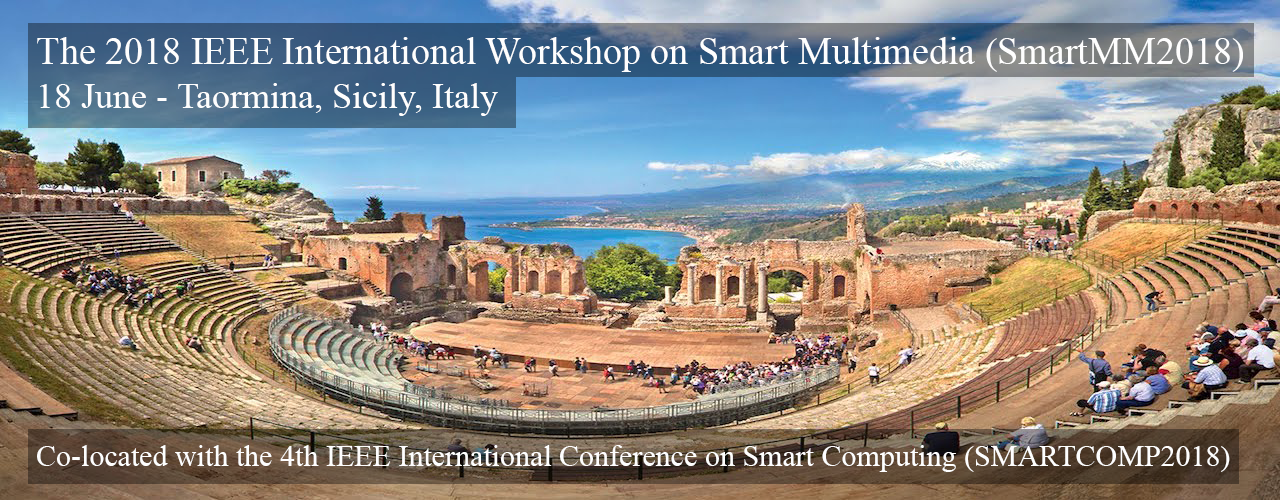
<style>
.page{position:relative;width:1280px;height:500px}
.page>*{position:absolute;margin:0}
.t1{font:38px "TimesNewRomanPSMT";color:#fefefe}
.t2{font:36px "TimesNewRomanPSMT";color:#fefefe}
.t3{font:30px "TimesNewRomanPSMT";color:#fefefe}
</style>
<div class="page">
<p class="t1" style="left:37px;top:37px;width:1206px;height:79px">The 2018 IEEE International Workshop on Smart Multimedia (SmartMM2018)<br><span class="t2">18 June - Taormina, Sicily, Italy</span></p>
<p class="t3" style="left:37px;top:445px;width:1193px;height:27px">Co-located with the 4th IEEE International Conference on Smart Computing (SMARTCOMP2018)</p>
</div>
